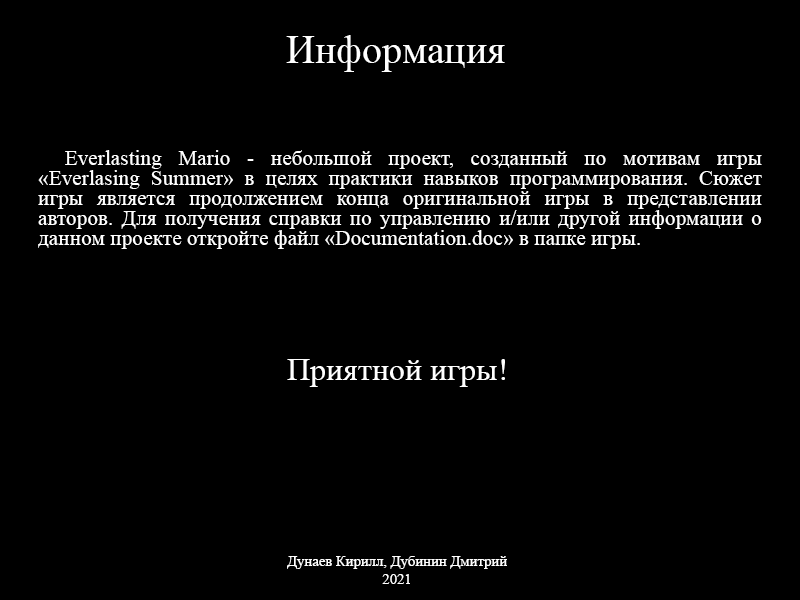
<style>
.page{position:relative;width:800px;height:600px;background:#000000}
.page>*{position:absolute;margin:0}
.t1{font:40px "TimesNewRomanPSMT";color:#ffffff}
.t2{font:21.3px/20px "TimesNewRomanPSMT";color:#ffffff}
.t3{font:32px "TimesNewRomanPSMT";color:#ffffff}
.t4{font:14.7px "TimesNewRomanPSMT";color:#ffffff}
</style>
<div class="page">
<p class="t1" style="left:286px;top:35px;width:219px;height:37px">Информация</p>
<p class="t2" style="left:38px;top:150px;width:724px;height:99px;text-align:justify">Everlasting Mario - небольшой проект, созданный по мотивам игры «Everlasing Summer» в целях практики навыков программирования. Сюжет игры является продолжением конца оригинальной игры в представлении авторов. Для получения справки по управлению и/или другой информации о данном проекте откройте файл «Documentation.doc» в папке игры.</p>
<p class="t3" style="left:287px;top:359px;width:218px;height:28px">Приятной игры!</p>
<p class="t4" style="left:287px;top:556px;width:220px;height:28px;text-align:center">Дунаев Кирилл, Дубинин Дмитрий<br>2021</p>
</div>
